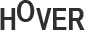
<style>
.page{position:relative;width:85px;height:30px;background:#ffffff}
.page>*{position:absolute;margin:0}
.t1{font:30px "HelveticaCYBold";letter-spacing:-0.025em;color:#2f2f2f}
</style>
<div class="page">
<p class="t1" style="left:17px;top:0px;width:18px;height:22px">O</p>
<p class="t1" style="left:0px;top:8px;width:85px;height:22px">H   VER</p>
</div>
